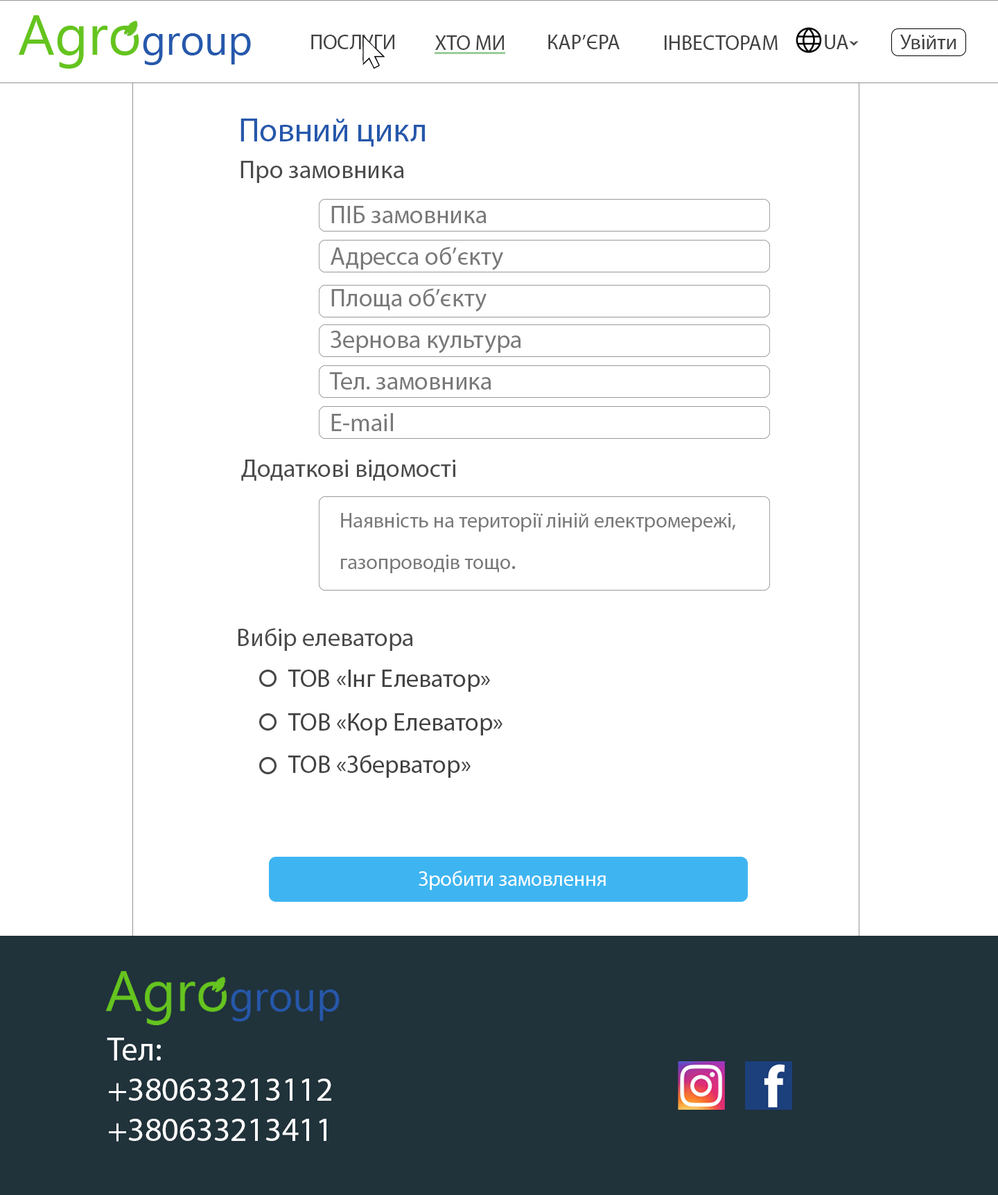
<style>
.page{position:relative;width:998px;height:1195px;background:#ffffff}
.page>*{position:absolute;margin:0}
.t1{font:20.8px "MyriadPro-Regular";color:#424242}
.t2{font:33.3px "MyriadPro-Regular";color:#2658ab}
.t3{font:24.9px "MyriadPro-Regular";color:#4b4b4b}
.t4{font:24.9px/41.6px "MyriadPro-Regular";color:#797979}
.t5{font:20.8px/41.6px "MyriadPro-Regular";color:#797979}
.t6{font:24.9px "MyriadPro-Regular";color:#424242}
.t7{font:20.8px "MyriadPro-Regular";color:#ffffff}
.t8{font:33.5px "MyriadPro-Regular";color:#ffffff}
</style>
<div class="page">
<p class="t1" style="left:311px;top:35px;width:83px;height:14px">ПОСЛУГИ</p>
<p class="t1" style="left:435px;top:35px;width:69px;height:15px">ХТО МИ</p>
<p class="t1" style="left:548px;top:35px;width:72px;height:14px">КАР’ЄРА</p>
<p class="t1" style="left:665px;top:35px;width:113px;height:15px">ІНВЕСТОРАМ</p>
<p class="t1" style="left:825px;top:35px;width:23px;height:14px">UA</p>
<p class="t1" style="left:900px;top:35px;width:56px;height:14px">Увійти</p>
<p class="t2" style="left:240px;top:119px;width:185px;height:28px">Повний цикл</p>
<p class="t3" style="left:240px;top:161px;width:164px;height:22px">Про замовника</p>
<p class="t4" style="left:329px;top:206px;width:192px;height:225px">ПІБ замовника<br>Адресса об’єкту<br>Площа об’єкту<br>Зернова культура<br>Тел. замовника<br>E-mail</p>
<p class="t3" style="left:241px;top:459px;width:214px;height:22px">Додаткові відомості</p>
<p class="t5" style="left:341px;top:513px;width:394px;height:60px">Наявність на території ліній електромережі, <br>газопроводів тощо<span class="t4">.</span></p>
<p class="t3" style="left:238px;top:628px;width:175px;height:23px">Вибір елеватора</p>
<p class="t6" style="left:288px;top:669px;width:202px;height:23px">ТОВ «Інг Елеватор»</p>
<p class="t6" style="left:288px;top:713px;width:214px;height:22px">ТОВ «Кор Елеватор»</p>
<p class="t6" style="left:288px;top:755px;width:183px;height:23px">ТОВ «Зберватор»</p>
<p class="t7" style="left:419px;top:870px;width:187px;height:20px">Зробити замовлення</p>
<p class="t8" style="left:107px;top:1038px;width:224px;height:103px">Тел:<br>+380633213112<br>+380633213411</p>
</div>
